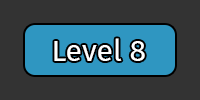
<style>
.page{position:relative;width:200px;height:100px;background:#333333}
.page>*{position:absolute;margin:0}
.t1{font:30px "FiraSans-Regular";color:#ffffff}
</style>
<div class="page">
<p class="t1" style="left:54px;top:38px;width:91px;height:23px">Level 8</p>
</div>
